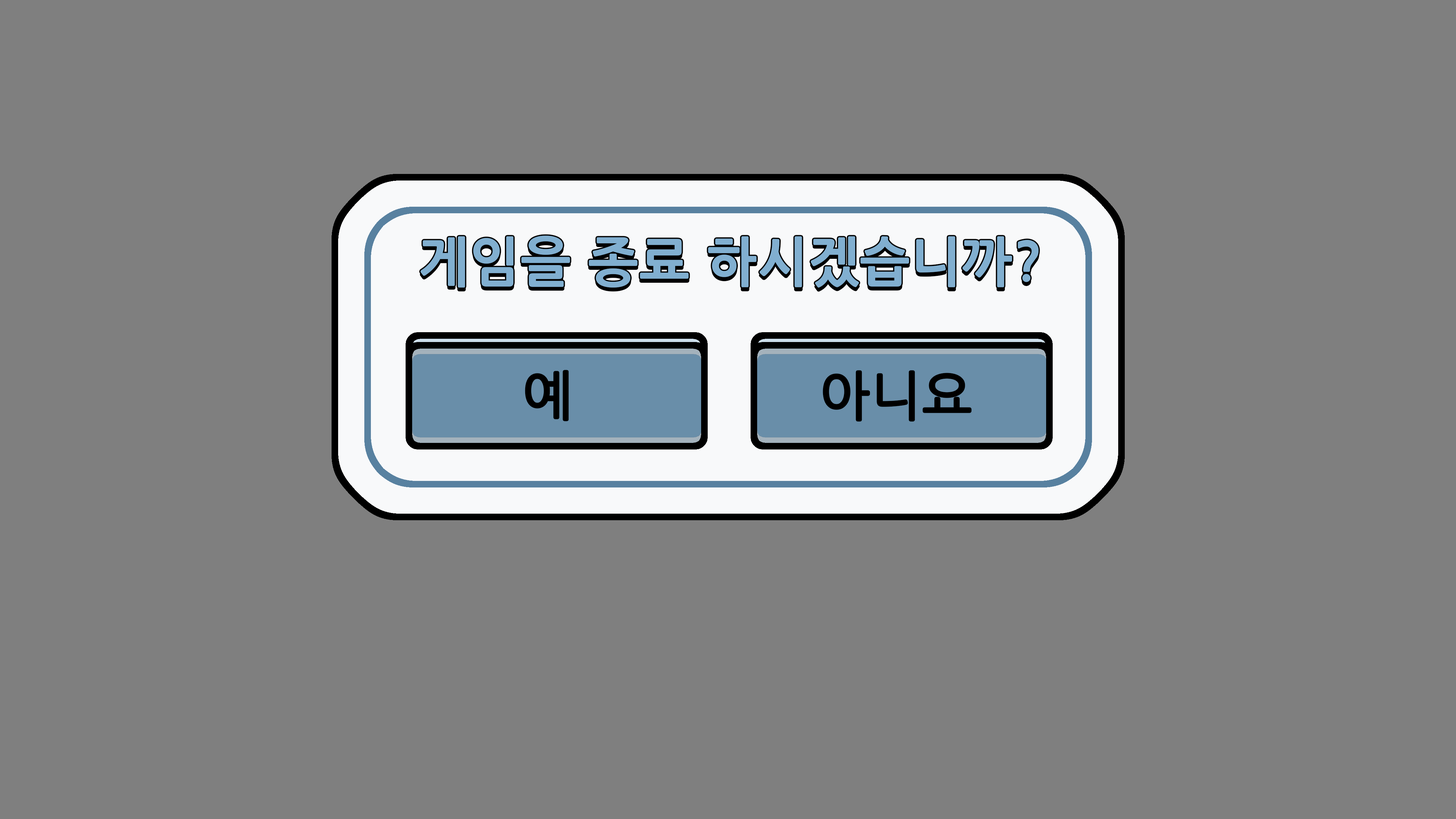
<style>
.page{position:relative;width:1456px;height:819px;background:#7f7f7f}
.page>*{position:absolute;margin:0}
.t1{font:52.9px "NanumGothicOTFBold";font-weight:bold}
.t2{font:52.9px "NanumGothic";color:#000000;font-weight:bold}
</style>
<div class="page">
<p class="t1" style="left:420px;top:239px;width:619px;height:52px">게임을 종료 하시겠습니까?</p>
<p class="t2" style="left:525px;top:371px;width:43px;height:50px">예</p>
<p class="t2" style="left:823px;top:371px;width:148px;height:50px">아니요</p>
</div>
